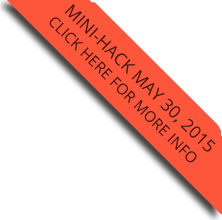
<style>
.page{position:relative;width:222px;height:220px;background:#ffffff}
.page>*{position:absolute;margin:0}
.t1{font:17px "OpenSans";letter-spacing:0.01em;color:#3a1711;text-transform:uppercase}
.t2{font:15px "OpenSans";letter-spacing:0.01em;color:#3a1711;text-transform:uppercase}
</style>
<div class="page">
<p class="t1" style="left:64px;top:4px;width:152px;height:148px;rotate:44deg">Mini-Hack May 30, 2015</p>
<p class="t2" style="left:49px;top:17px;width:148px;height:146px;rotate:45deg">Click here for more info</p>
</div>
